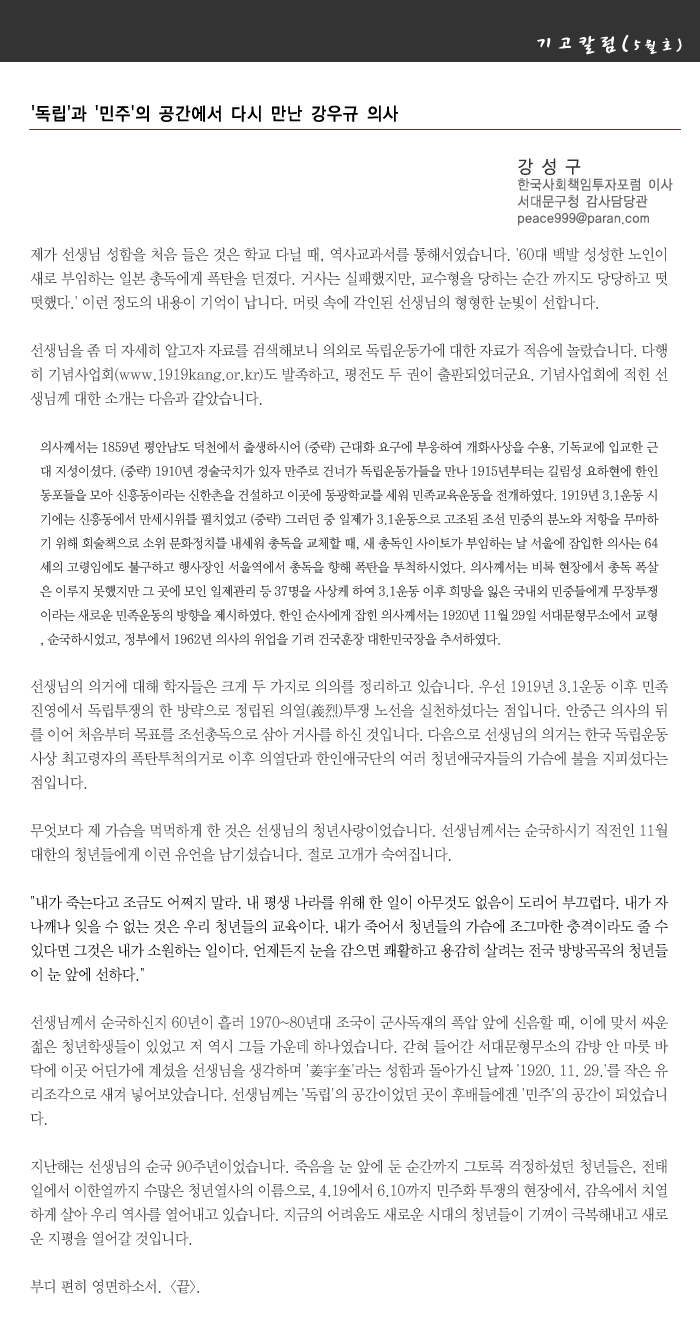
<style>
.page{position:relative;width:700px;height:1329px;background:#ffffff}
.page>*{position:absolute;margin:0}
.t1{font:24px "CwritB";letter-spacing:-0.01em;color:#ffffff;scale:0.9 1}
.t2{font:18px "CwritB";letter-spacing:-0.01em;color:#ffffff;scale:0.9 1}
.t3{font:18px "YDIYGO130-KSCpc-EUC-H";letter-spacing:-0.01em;color:#000000;scale:0.9 1}
.t4{font:14px "YDIYGO120-KSCpc-EUC-H";letter-spacing:-0.01em;color:#666666;scale:0.9 1}
.t5{font:18px "YDIYGO120-KSCpc-EUC-H";letter-spacing:-0.01em;color:#333333;scale:0.9 1}
.t6{font:13px/24px "YDIWebBatan";letter-spacing:-0.01em;color:#333333;scale:0.95 1}
.t7{font:15px/24px "YDIWebBatan";letter-spacing:-0.01em;color:#333333;scale:0.95 1}
.t8{font:15px/24px "YDIWebBatan";letter-spacing:-0.01em;color:#000000;scale:0.95 1}
</style>
<div class="page">
<p class="t1" style="left:537px;top:34px;width:145px;height:21px">기고칼럼(<span class="t2">5월호)</span></p>
<p class="t3" style="left:32px;top:105px;width:366px;height:17px">'독립'과 '민주'의 공간에서 다시 만난 강우규 의사</p>
<p class="t4" style="left:517px;top:158px;width:156px;height:68px"><span class="t5">강 성 구<br></span>한국사회책임투자포럼 이사<br>서대문구청 감사담당관<br>peace999@paran.com</p>
<p class="t6" style="left:30px;top:247px;width:638px;height:1047px;text-align:justify"><span class="t7">제가 선생님 성함을 처음 들은 것은 학교 다닐 때, 역사교과서를 통해서였습니다. '60대 백발 성성한 노인이 새로 부임하는 일본 총독에게 폭탄을 던졌다. 거사는 실패했지만, 교수형을 당하는 순간 까지도 당당하고 떳떳했다.' 이런 정도의 내용이 기억이 납니다. 머릿 속에 각인된 선생님의 형형한 눈빛이 선합니다.<br><br>선생님을 좀 더 자세히 알고자 자료를 검색해보니 의외로 독립운동가에 대한 자료가 적음에 놀랐습니다. 다행히 기념사업회(www.1919kang.or.kr)도 발족하고, 평전도 두 권이 출판되었더군요. 기념사업회에 적힌 선생님께 대한 소개는 다음과 같았습니다.<br><br></span>의사께서는 1859년 평안남도 덕천에서 출생하시어 (중략) 근대화 요구에 부응하여 개화사상을 수용, 기독교에 입교한 근대 지성이셨다. (중략) 1910년 경술국치가 있자 만주로 건너가 독립운동가들을 만나 1915년부터는 길림성 요하현에 한인 동포들을 모아 신흥동이라는 신한촌을 건설하고 이곳에 동광학교를 세워 민족교육운동을 전개하였다. 1919년 3.1운동 시기에는 신흥동에서 만세시위를 펼치었고 (중략) 그러던 중 일제가 3.1운동으로 고조된 조선 민중의 분노와 저항을 무마하기 위해 회술책으로 소위 문화정치를 내세워 총독을 교체할 때, 새 총독인 사이토가 부임하는 날 서울에 잠입한 의사는 64세의 고령임에도 불구하고 행사장인 서울역에서 총독을 향해 폭탄을 투척하시었다. 의사께서는 비록 현장에서 총독 폭살은 이루지 못했지만 그 곳에 모인 일제관리 등 37명을 사상케 하여 3.1운동 이후 희망을 잃은 국내외 민중들에게 무장투쟁이라는 새로운 민족운동의 방향을 제시하였다. 한인 순사에게 잡힌 의사께서는 1920년 11월 29일 서대문형무소에서 교형, 순국하시었고, 정부에서 1962년 의사의 위업을 기려 건국훈장 대한민국장을 추서하였다.<br><br><span class="t7">선생님의 의거에 대해 학자들은 크게 두 가지로 의의를 정리하고 있습니다. 우선 1919년 3.1운동 이후 민족진영에서 독립투쟁의 한 방략으로 정립된 의열(義烈)투쟁 노선을 실천하셨다는 점입니다. 안중근 의사의 뒤를 이어 처음부터 목표를 조선총독으로 삼아 거사를 하신 것입니다. 다음으로 선생님의 의거는 한국 독립운동사상 최고령자의 폭탄투척의거로 이후 의열단과 한인애국단의 여러 청년애국자들의 가슴에 불을 지피셨다는 점입니다.<br><br>무엇보다 제 가슴을 먹먹하게 한 것은 선생님의 청년사랑이었습니다. 선생님께서는 순국하시기 직전인 11월 대한의 청년들에게 이런 유언을 남기셨습니다. 절로 고개가 숙여집니다.<br><br></span><span class="t8">"내가 죽는다고 조금도 어쩌지 말라. 내 평생 나라를 위해 한 일이 아무것도 없음이 도리어 부끄럽다. 내가 자나깨나 잊을 수 없는 것은 우리 청년들의 교육이다. 내가 죽어서 청년들의 가슴에 조그마한 충격이라도 줄 수 있다면 그것은 내가 소원하는 일이다. 언제든지 눈을 감으면 쾌활하고 용감히 살려는 전국 방방곡곡의 청년들이 눈 앞에 선하다."<br></span><span class="t7"><br>선생님께서 순국하신지 60년이 흘러 1970~80년대 조국이 군사독재의 폭압 앞에 신음할 때, 이에 맞서 싸운 젊은 청년학생들이 있었고 저 역시 그들 가운데 하나였습니다. 갇혀 들어간 서대문형무소의 감방 안 마룻 바닥에 이곳 어딘가에 계셨을 선생님을 생각하며 '姜宇奎'라는 성함과 돌아가신 날짜 '1920. 11. 29.'를 작은 유리조각으로 새겨 넣어보았습니다. 선생님께는 '독립'의 공간이었던 곳이 후배들에겐 '민주'의 공간이 되었습니다.<br><br>지난해는 선생님의 순국 90주년이었습니다. 죽음을 눈 앞에 둔 순간까지 그토록 걱정하셨던 청년들은, 전태일에서 이한열까지 수많은 청년열사의 이름으로, 4.19에서 6.10까지 민주화 투쟁의 현장에서, 감옥에서 치열하게 살아 우리 역사를 열어내고 있습니다. 지금의 어려움도 새로운 시대의 청년들이 기꺼이 극복해내고 새로운 지평을 열어갈 것입니다. <br><br>부디 편히 영면하소서.  &lt;끝&gt;.</span></p>
</div>
